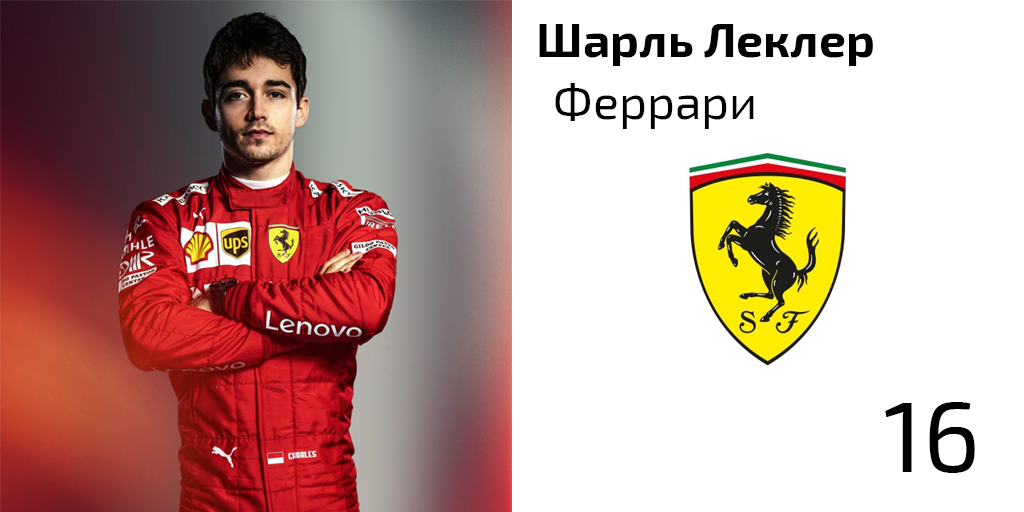
<style>
.page{position:relative;width:1024px;height:512px;background:#ffffff}
.page>*{position:absolute;margin:0}
.t1{font:48px "Exo2-Bold";color:#000000}
.t2{font:48px "Exo2-Regular";color:#000000}
.t3{font:100px "Exo2-Regular";color:#000000}
</style>
<div class="page">
<p class="t1" style="left:539px;top:24px;width:334px;height:42px">Шарль Леклер</p>
<p class="t2" style="left:555px;top:83px;width:199px;height:46px">Феррари</p>
<p class="t3" style="left:885px;top:402px;width:90px;height:71px">16</p>
</div>
